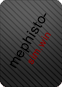
<style>
.page{position:relative;width:62px;height:87px}
.page>*{position:absolute;margin:0}
.t1{font:14px "ArialMT";letter-spacing:0.025em;color:#010101}
.t2{font:10px "ArialMT";letter-spacing:0.05em;color:#7b0100}
</style>
<div class="page">
<p class="t1" style="left:9px;top:13px;width:38px;height:56px;rotate:-58deg">mephisto-</p>
<p class="t2" style="left:28px;top:32px;width:23px;height:33px;rotate:-58deg">sim.win</p>
</div>
